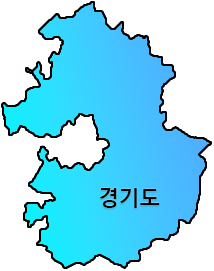
<style>
.page{position:relative;width:214px;height:271px;background:#ffffff}
.page>*{position:absolute;margin:0}
.t1{font:22px "HancomGothicBold";color:#000000}
</style>
<div class="page">
<p class="t1" style="left:99px;top:188px;width:61px;height:20px">경기도</p>
</div>
